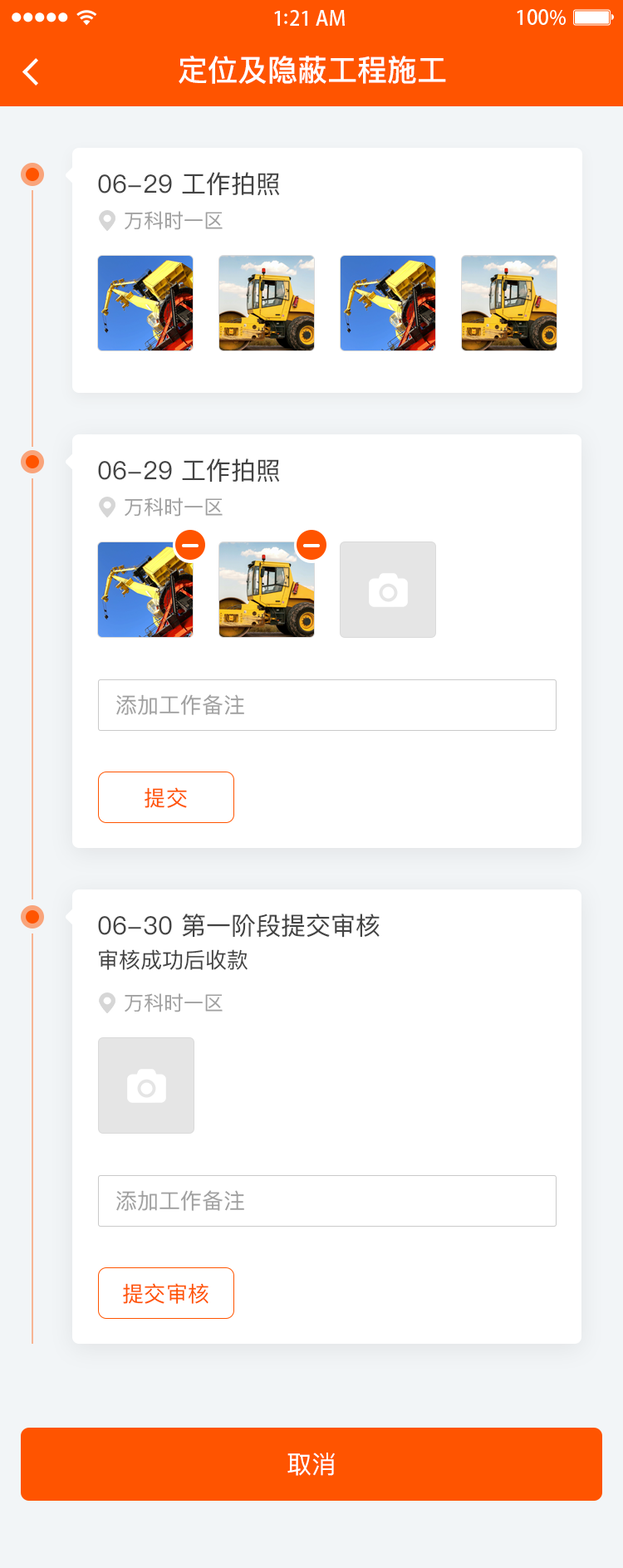
<style>
.page{position:relative;width:623px;height:1568px;background:#ffffff}
.page>*{position:absolute;margin:0}
.t1{font:29.9px "PingFangSC-Medium";color:#ffffff}
.t2{font:24.9px "PingFangSC-Regular";color:#434343}
.t3{font:19.9px "PingFangSC-Regular";color:#a0a0a0}
.t4{font:21.6px "PingFangSC-Regular";color:#a0a0a0}
.t5{font:21.6px "PingFangSC-Regular";letter-spacing:0.02em;color:#ff5400}
.t6{font:21.6px/36.5px "PingFangSC-Regular";color:#434343}
.t7{font:24.9px "PingFangSC-Regular";color:#ffffff;text-transform:uppercase}
</style>
<div class="page">
<p class="t1" style="left:179px;top:56px;width:267px;height:28px">定位及隐蔽工程施工</p>
<p class="t2" style="left:98px;top:172px;width:182px;height:24px">06-29 工作拍照</p>
<p class="t3" style="left:125px;top:211px;width:98px;height:19px">万科时一区</p>
<p class="t2" style="left:98px;top:458px;width:182px;height:25px">06-29 工作拍照</p>
<p class="t3" style="left:125px;top:497px;width:98px;height:20px">万科时一区</p>
<p class="t4" style="left:116px;top:694px;width:128px;height:21px">添加工作备注</p>
<p class="t5" style="left:145px;top:787px;width:42px;height:21px">提交</p>
<p class="t2" style="left:98px;top:914px;width:282px;height:56px">06-30 第一阶段提交审核<br><span class="t6">审核成功后收款</span></p>
<p class="t3" style="left:125px;top:993px;width:98px;height:19px">万科时一区</p>
<p class="t4" style="left:116px;top:1190px;width:128px;height:21px">添加工作备注</p>
<p class="t5" style="left:123px;top:1283px;width:85px;height:21px">提交审核</p>
<p class="t7" style="left:287px;top:1453px;width:48px;height:23px">取消</p>
</div>
